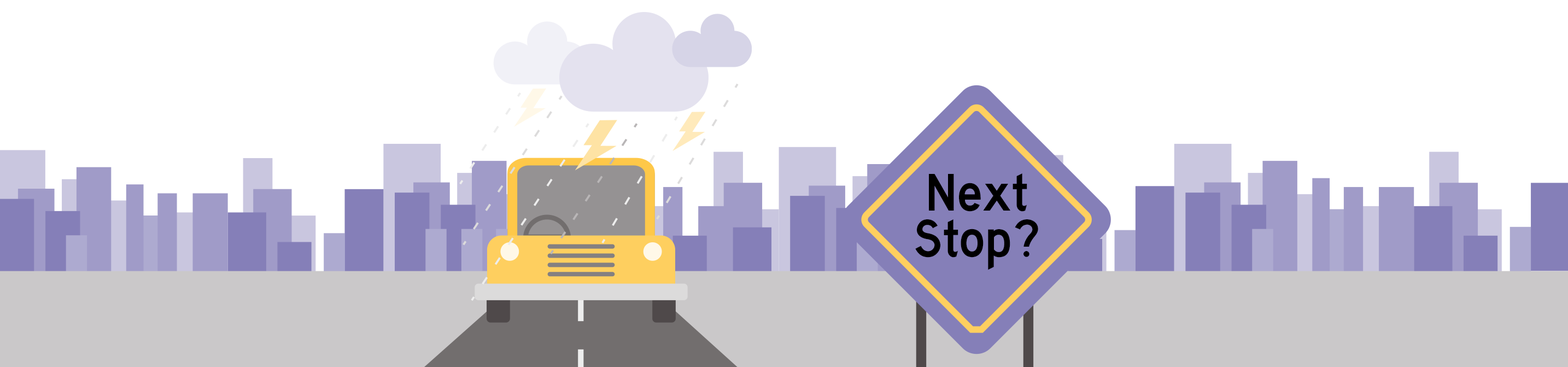
<style>
.page{position:relative;width:1568px;height:367px;background:#ffffff}
.page>*{position:absolute;margin:0}
.t1{font:54.7px/45.9px "HighwayGothic";color:#000000}
</style>
<div class="page">
<p class="t1" style="left:915px;top:173px;width:123px;height:97px;text-align:center">Next<br>Stop?</p>
</div>
